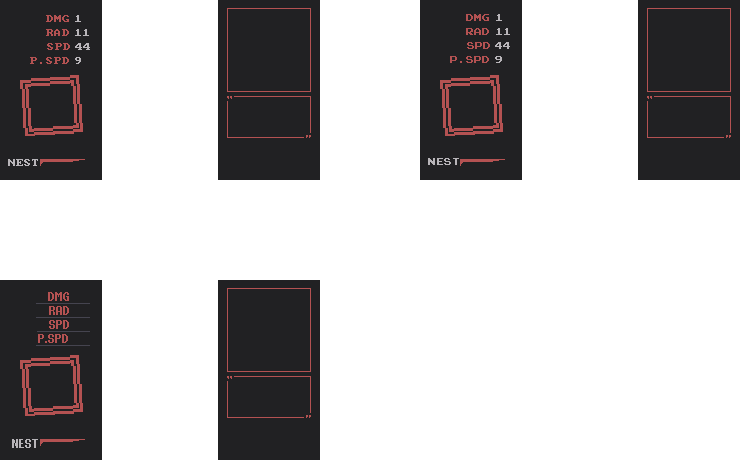
<style>
.page{position:relative;width:740px;height:460px;background:#ffffff}
.page>*{position:absolute;margin:0}
.t1{font:8px "PCSeniorReg";color:#b45252}
.t2{font:8px "PCSeniorReg";color:#b8b5b9}
.t3{font:8px "PressStartReg";color:#b45252}
.t4{font:8px "PressStartReg";color:#b8b5b9}
.t5{font:16px "PixelPurl";color:#b45252}
.t6{font:16px "PixelPurl";color:#b8b5b9}
</style>
<div class="page">
<p class="t1" style="left:46px;top:15px;width:23px;height:7px">DMG</p>
<p class="t2" style="left:75px;top:15px;width:6px;height:7px">1</p>
<p class="t3" style="left:466px;top:14px;width:23px;height:7px">DMG</p>
<p class="t4" style="left:496px;top:14px;width:6px;height:7px">1</p>
<p class="t1" style="left:46px;top:29px;width:23px;height:7px">RAD</p>
<p class="t2" style="left:75px;top:29px;width:14px;height:7px">11</p>
<p class="t3" style="left:466px;top:28px;width:23px;height:7px">RAD</p>
<p class="t4" style="left:496px;top:28px;width:14px;height:7px">11</p>
<p class="t1" style="left:47px;top:43px;width:23px;height:7px">SPD</p>
<p class="t2" style="left:75px;top:43px;width:15px;height:7px">44</p>
<p class="t3" style="left:467px;top:42px;width:23px;height:7px">SPD</p>
<p class="t4" style="left:495px;top:42px;width:15px;height:7px">44</p>
<p class="t1" style="left:30px;top:57px;width:39px;height:7px">P.SPD</p>
<p class="t2" style="left:75px;top:57px;width:6px;height:7px">9</p>
<p class="t3" style="left:450px;top:56px;width:39px;height:7px">P.SPD</p>
<p class="t4" style="left:495px;top:56px;width:7px;height:7px">9</p>
<p class="t2" style="left:8px;top:159px;width:30px;height:7px">NEST</p>
<p class="t4" style="left:428px;top:158px;width:31px;height:7px">NEST</p>
<p class="t5" style="left:48px;top:292px;width:21px;height:9px">DMG</p>
<p class="t5" style="left:49px;top:306px;width:20px;height:9px">RAD</p>
<p class="t5" style="left:49px;top:320px;width:20px;height:9px">SPD</p>
<p class="t5" style="left:38px;top:334px;width:30px;height:9px">P.SPD</p>
<p class="t6" style="left:12px;top:439px;width:26px;height:9px">NEST</p>
</div>
